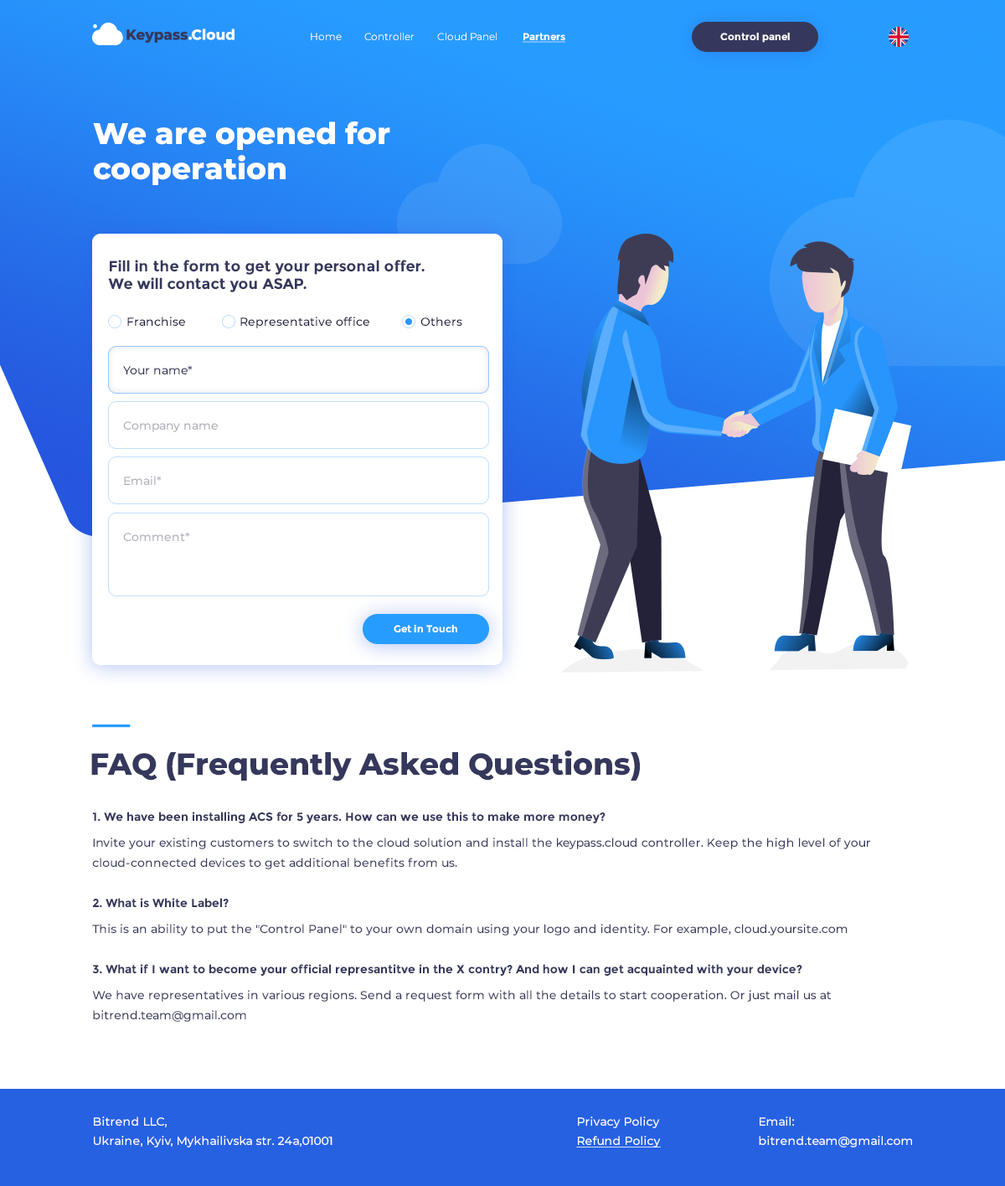
<style>
.page{position:relative;width:1005px;height:1186px;background:#ffffff}
.page>*{position:absolute;margin:0}
.t1{font:10.1px "Montserrat-Regular";color:#ffffff}
.t2{font:10.1px "Montserrat-Bold";color:#ffffff;text-decoration:underline}
.t3{font:10.1px "Montserrat-Bold";color:#ffffff}
.t4{font:30.2px/29.4px "Montserrat-ExtraBold";color:#ffffff}
.t5{font:15.1px/11.7px "Montserrat-Bold";color:#35385c}
.t6{font:11.7px "Montserrat-Medium";color:#1f2040}
.t7{font:11.7px "Montserrat-Medium";color:#35385c}
.t8{font:11.7px "Montserrat-Medium";color:#adaeb9}
.t9{font:30.2px "Montserrat-ExtraBold";color:#35385c}
.t10{font:11.7px/20.1px "Montserrat-Medium";color:#35385c}
.t11{font:11.7px "Montserrat-Bold";color:#35385c}
.t12{font:11.7px "Montserrat-Medium";color:#ffffff}
.t13{font:11.7px "Montserrat-Medium";color:#ffffff;text-decoration:underline}
</style>
<div class="page">
<p class="t1" style="left:311px;top:33px;width:254px;height:10px">Home         Controller         Cloud Panel          <span class="t2">Partners</span></p>
<p class="t3" style="left:720px;top:33px;width:70px;height:10px">Control panel</p>
<p class="t4" style="left:93px;top:121px;width:297px;height:64px">We are opened for <br>cooperation</p>
<p class="t5" style="left:108px;top:260px;width:317px;height:32px">Fill in the form to get your personal offer. <br>We will contact you ASAP.</p>
<p class="t6" style="left:127px;top:317px;width:335px;height:11px">Franchise                Representative office               Others</p>
<p class="t7" style="left:123px;top:365px;width:70px;height:9px">Your name*</p>
<p class="t8" style="left:123px;top:421px;width:95px;height:11px">Company name</p>
<p class="t8" style="left:124px;top:476px;width:38px;height:9px">Email*</p>
<p class="t8" style="left:123px;top:532px;width:67px;height:9px">Comment*</p>
<p class="t3" style="left:394px;top:625px;width:63px;height:7px">Get in Touch</p>
<p class="t9" style="left:91px;top:751px;width:549px;height:31px">FAQ (Frequently Asked Questions)</p>
<p class="t10" style="left:92px;top:812px;width:778px;height:210px"><span class="t11">1. We have been installing ACS for 5 years. How can we use this to make more money?<br></span>Invite your existing customers to switch to the cloud solution and install the keypass.cloud controller. Keep the high level of your cloud-connected devices to get additional benefits from us.<br><br><span class="t11">2. What is White Label?<br></span>This is an ability to put the "Control Panel" to your own domain using your logo and identity. For example, cloud.yoursite.com<br><br><span class="t11">3. What if I want to become your official represantitve in the X contry? And how I can get acquainted with your device?<br></span>We have representatives in various regions. Send a request form with all the details to start cooperation. Or just mail us at bitrend.team@gmail.com</p>
<p class="t12" style="left:94px;top:1117px;width:239px;height:31px">Bitrend LLC,<br>Ukraine, Kyiv, Mykhailivska str. 24a,01001</p>
<p class="t12" style="left:576px;top:1117px;width:85px;height:31px">Privacy Policy<br><span class="t13">Refund Policy</span></p>
<p class="t12" style="left:759px;top:1117px;width:153px;height:31px">Email:<br>bitrend.team@gmail.com</p>
</div>
